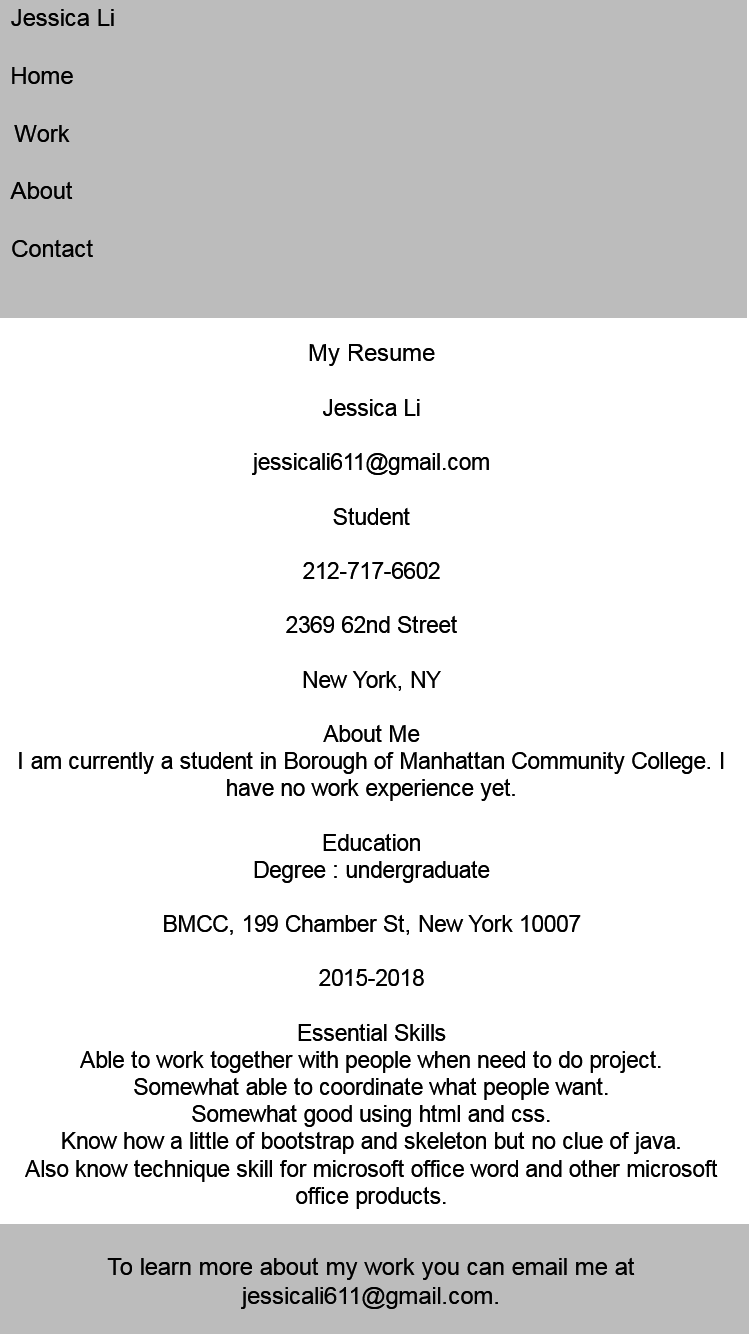
<style>
.page{position:relative;width:750px;height:1334px;background:#ffffff}
.page>*{position:absolute;margin:0}
.t1{font:24px "ArialMT";color:#000000}
.t2{font:22.6px "ArialMT";color:#000000}
</style>
<div class="page">
<p class="t1" style="left:10px;top:9px;width:104px;height:248px;text-align:center">Jessica Li<br> <br>Home<br><br>Work<br>  <br>About<br>   <br>   Contact</p>
<p class="t1" style="left:309px;top:344px;width:126px;height:22px">My Resume</p>
<p class="t2" style="left:19px;top:399px;width:705px;height:810px;text-align:center">Jessica Li<br><br>jessicali611@gmail.com<br><br>Student<br><br>212-717-6602<br><br>2369 62nd Street<br><br>New York, NY<br><br>About Me<br>I am currently a student in Borough of Manhattan Community College. I have no work experience yet.<br><br>Education<br>Degree : undergraduate<br><br>BMCC, 199 Chamber St, New York 10007<br><br>2015-2018<br><br>Essential Skills<br>Able to work together with people when need to do project.<br>Somewhat able to coordinate what people want.<br>Somewhat good using html and css.<br>Know how a little of bootstrap and skeleton but no clue of java.<br>Also know technique skill for microsoft office word and other microsoft office products.</p>
<p class="t1" style="left:107px;top:1257px;width:528px;height:52px;text-align:center">To learn more about my work you can email me at jessicali611@gmail.com.</p>
</div>
